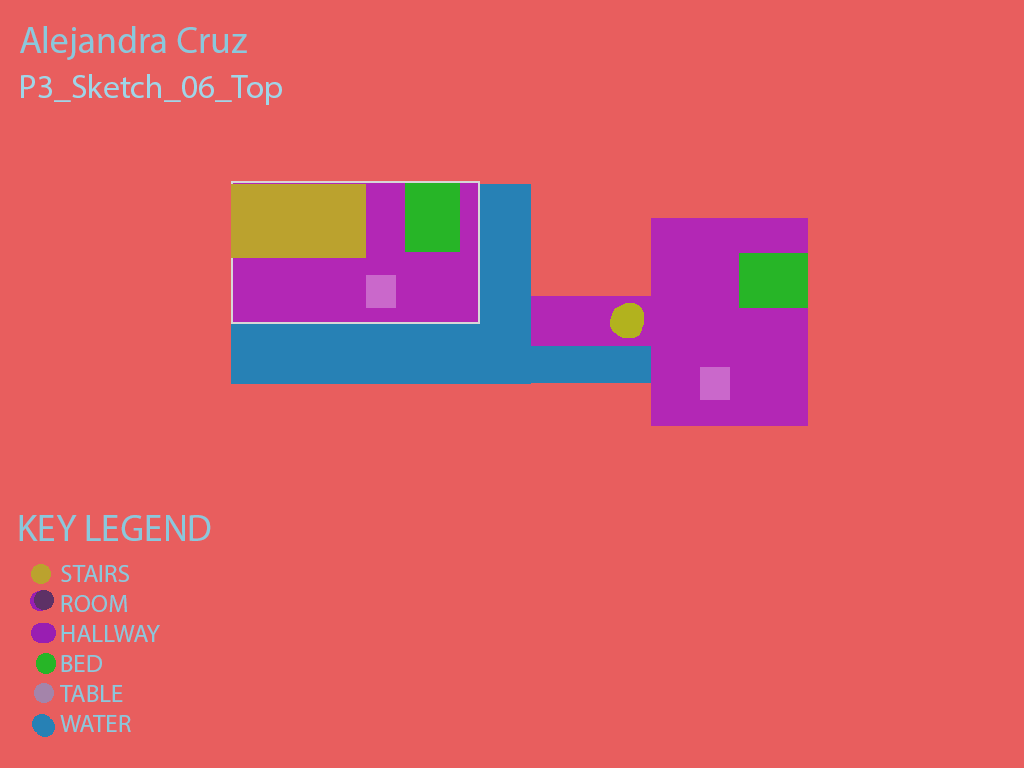
<style>
.page{position:relative;width:1024px;height:768px;background:#e85e5e}
.page>*{position:absolute;margin:0}
.t1{font:37.5px "MyriadPro-Regular";color:#89c8dc}
.t2{font:33.3px "MyriadPro-Regular";color:#9ed6e8}
.t3{font:25px "MyriadPro-Regular";color:#89c8dc}
</style>
<div class="page">
<p class="t1" style="left:20px;top:26px;width:227px;height:34px">Alejandra Cruz</p>
<p class="t2" style="left:21px;top:74px;width:261px;height:31px">P3_Sketch_06_Top</p>
<p class="t1" style="left:19px;top:515px;width:192px;height:26px">KEY LEGEND</p>
<p class="t3" style="left:60px;top:565px;width:100px;height:167px">STAIRS<br>ROOM<br>HALLWAY<br>BED<br>TABLE<br>WATER</p>
</div>
